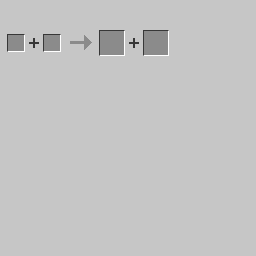
<style>
.page{position:relative;width:256px;height:256px;background:#c6c6c6}
.page>*{position:absolute;margin:0}
.t1{font:18px "KozGoPro-Bold";color:#373737}
</style>
<div class="page">
<p class="t1" style="left:29px;top:38px;width:10px;height:10px">+</p>
<p class="t1" style="left:129px;top:38px;width:10px;height:10px">+</p>
</div>
